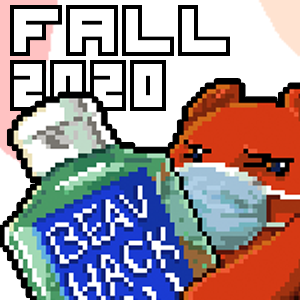
<style>
.page{position:relative;width:300px;height:300px;background:#ffffff}
.page>*{position:absolute;margin:0}
.t1{font:62.6px "Thirteen-Pixel-Fonts";color:#000000}
</style>
<div class="page">
<p class="t1" style="left:10px;top:5px;width:220px;height:51px">FALL</p>
<p class="t1" style="left:10px;top:60px;width:156px;height:51px">2020</p>
</div>
